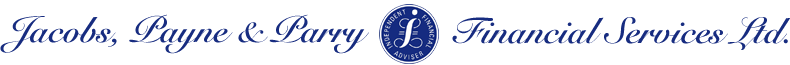
<style>
.page{position:relative;width:790px;height:65px;background:#ffffff}
.page>*{position:absolute;margin:0}
.t1{font:36px "SnellRoundhand-Bold";color:#172c80}
</style>
<div class="page">
<p class="t1" style="left:0px;top:14px;width:369px;height:40px">Jacobs, Payne &amp; Parry</p>
<p class="t1" style="left:452px;top:17px;width:339px;height:33px">Financial Services Ltd.</p>
</div>
